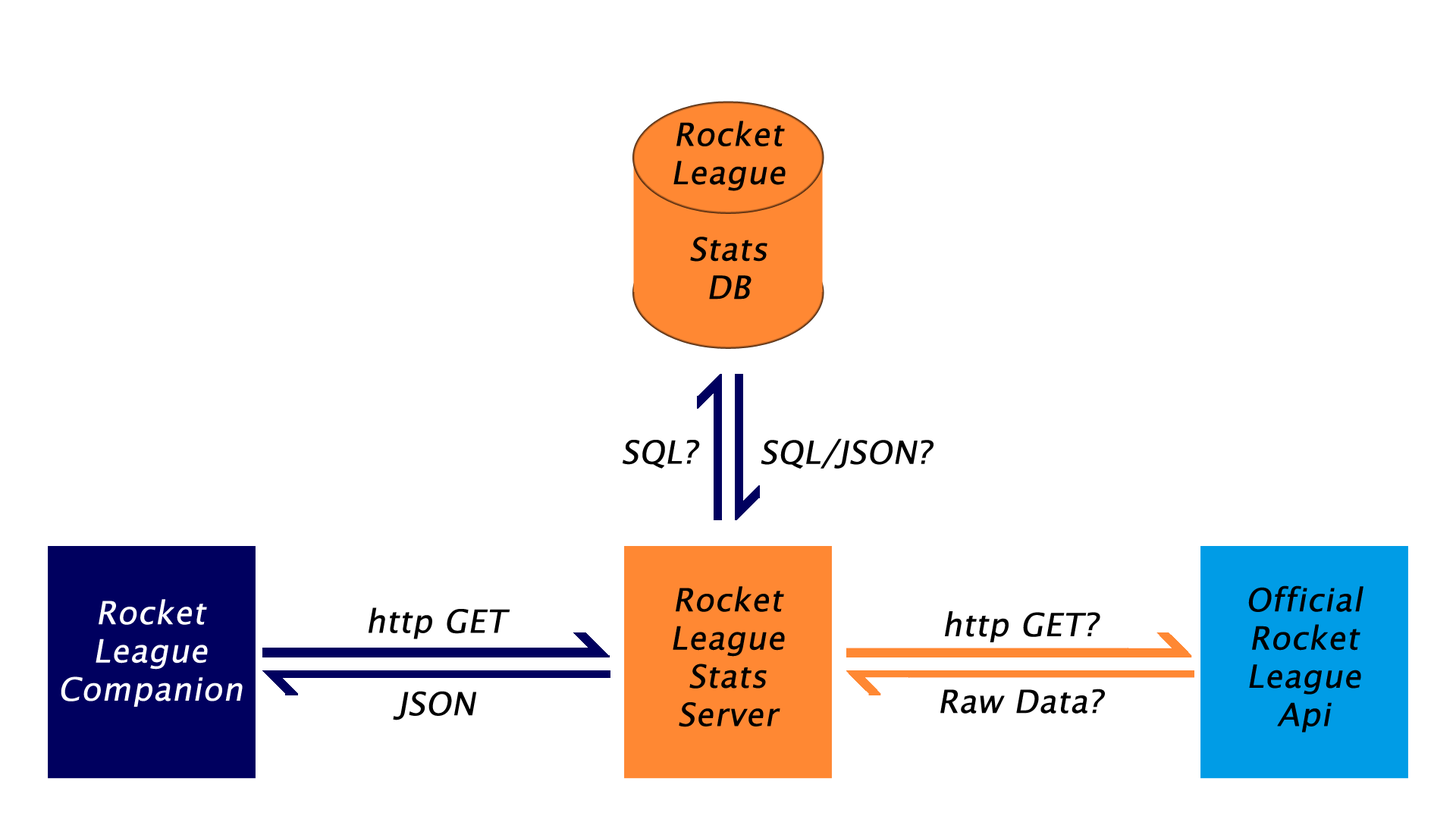
<style>
.page{position:relative;width:1456px;height:819px;background:#ffffff}
.page>*{position:absolute;margin:0}
.t1{font:31.8px "LucidaSans";color:#000000;font-weight:bold;font-style:italic}
.t2{font:31.8px "LucidaSans";color:#ffffff;font-weight:bold;font-style:italic}
</style>
<div class="page">
<p class="t1" style="left:673px;top:121px;width:113px;height:179px;text-align:center">Rocket League<br><br>Stats<br>DB</p>
<p class="t1" style="left:623px;top:440px;width:77px;height:29px">SQL?</p>
<p class="t1" style="left:761px;top:438px;width:172px;height:31px">SQL/JSON?</p>
<p class="t1" style="left:673px;top:586px;width:112px;height:141px;text-align:center">Rocket League Stats Server</p>
<p class="t1" style="left:1248px;top:585px;width:115px;height:148px;text-align:center">Official Rocket League<br>Api</p>
<p class="t2" style="left:61px;top:599px;width:182px;height:108px;text-align:center">Rocket League Companion</p>
<p class="t1" style="left:369px;top:607px;width:141px;height:32px">http GET</p>
<p class="t1" style="left:945px;top:611px;width:155px;height:31px">http GET?</p>
<p class="t1" style="left:940px;top:689px;width:165px;height:25px">Raw Data?</p>
<p class="t1" style="left:393px;top:691px;width:83px;height:29px">JSON</p>
</div>
